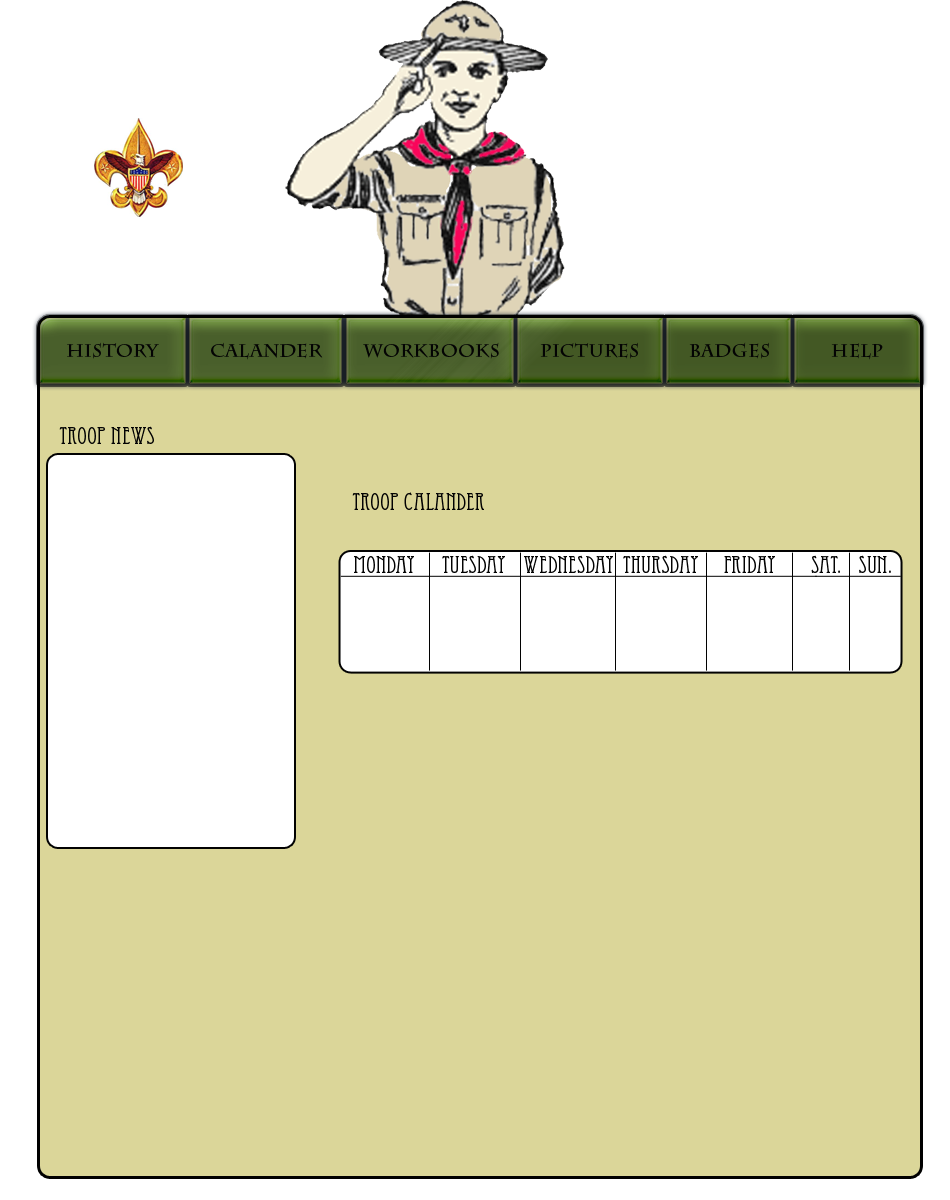
<style>
.page{position:relative;width:950px;height:1200px;background:#dbd699}
.page>*{position:absolute;margin:0}
.t1{font:18px "CharlemagneStd-Bold";letter-spacing:0.015em;color:#030303}
.t2{font:24px "EccentricStd";letter-spacing:0.015em;color:#030303}
.t3{font:24px "EccentricStd";letter-spacing:0.015em;color:#020202}
</style>
<div class="page">
<p class="t1" style="left:67px;top:342px;width:92px;height:17px">History</p>
<p class="t1" style="left:211px;top:342px;width:112px;height:18px">Calander</p>
<p class="t1" style="left:363px;top:342px;width:136px;height:17px">Workbooks</p>
<p class="t1" style="left:540px;top:342px;width:98px;height:17px">Pictures</p>
<p class="t1" style="left:689px;top:342px;width:80px;height:17px">Badges</p>
<p class="t1" style="left:831px;top:343px;width:52px;height:17px">Help</p>
<p class="t2" style="left:59px;top:426px;width:95px;height:18px">Troop News</p>
<p class="t3" style="left:352px;top:492px;width:132px;height:18px">Troop Calander</p>
<p class="t3" style="left:354px;top:556px;width:60px;height:17px">Monday</p>
<p class="t3" style="left:442px;top:555px;width:63px;height:18px">Tuesday</p>
<p class="t3" style="left:524px;top:555px;width:89px;height:18px">Wednesday</p>
<p class="t3" style="left:623px;top:555px;width:75px;height:18px">Thursday</p>
<p class="t3" style="left:724px;top:556px;width:51px;height:17px">Friday</p>
<p class="t3" style="left:811px;top:555px;width:29px;height:18px">Sat.</p>
<p class="t3" style="left:859px;top:555px;width:32px;height:18px">Sun.</p>
</div>
